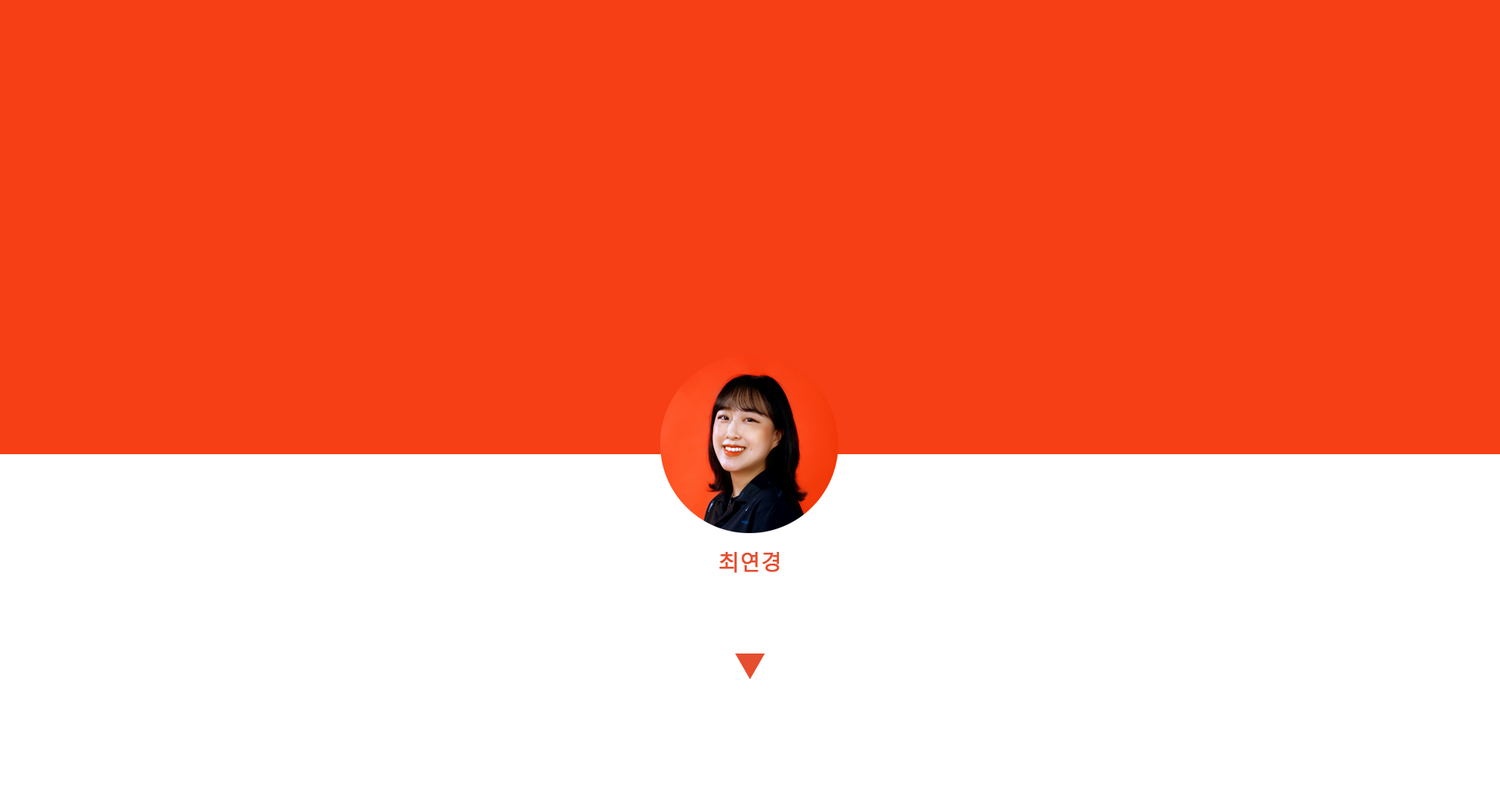
<style>
.page{position:relative;width:1500px;height:795px;background:#f63f14}
.page>*{position:absolute;margin:0}
.t1{font:20.8px "MalgunGothic";color:#e54e2f;font-weight:bold}
</style>
<div class="page">
<p class="t1" style="left:719px;top:552px;width:61px;height:21px">최연경</p>
</div>
